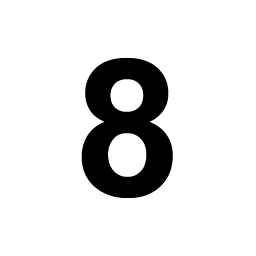
<style>
.page{position:relative;width:256px;height:256px;background:#ffffff}
.page>*{position:absolute;margin:0}
.t1{font:192.9px "Arial-BoldMT";color:#000000}
</style>
<div class="page">
<p class="t1" style="left:81px;top:57px;width:92px;height:141px">8</p>
</div>
